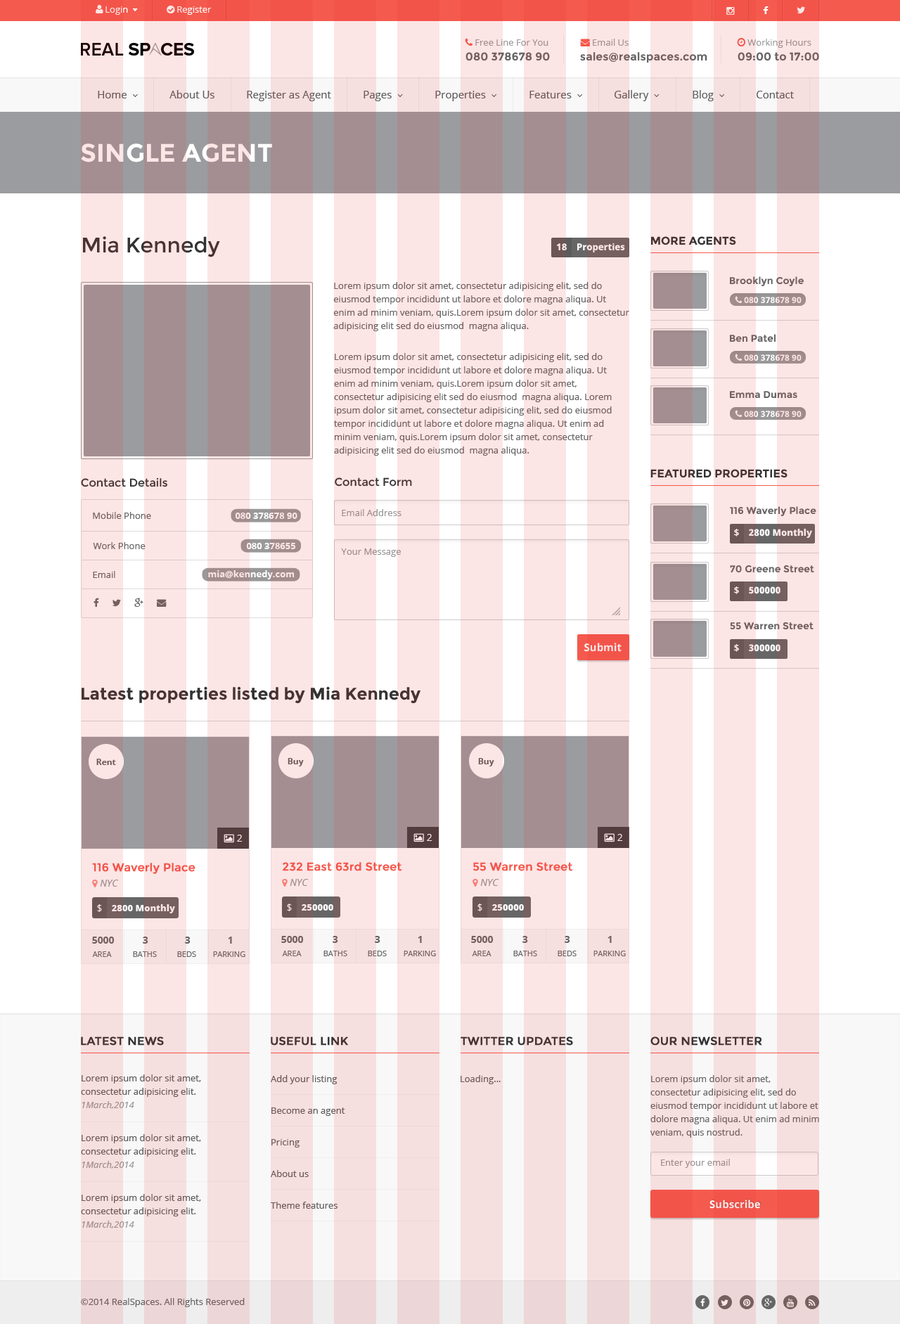
<style>
.page{position:relative;width:900px;height:1324px;background:#ffffff}
.page>*{position:absolute;margin:0}
.t1{font:11.3px "Montserrat-Bold";color:#666666}
.t2{font:10.6px "OpenSans";color:#5e5e5e}
.t3{font:25.3px "Montserrat-Bold";text-transform:uppercase}
.t4{font:21.1px "Montserrat-Regular";color:#333333}
.t5{font:9.1px "OpenSans-Bold";color:#fce5e5}
.t6{font:11.3px "Montserrat-Bold";color:#333333;text-transform:uppercase}
.t7{font:9.8px "Montserrat-Bold";color:#666666}
.t8{font:9.1px/13.4px "OpenSans";color:#666666}
.t9{font:11.3px "Montserrat-Regular";color:#333333}
.t10{font:9.1px "OpenSans";color:#999999}
.t11{font:9.1px "OpenSans";color:#666666}
.t12{font:9.1px "OpenSans-Bold"}
.t13{font:9.1px "OpenSans-Extrabold"}
.t14{font:9.1px "OpenSans-Extrabold";color:#ffffff}
.t15{font:9.1px "OpenSans-Bold";color:#ffffff}
.t16{font:10.6px "OpenSans-Bold";color:#fce5e5}
.t17{font:16.9px "Montserrat-Bold";color:#333333}
.t18{font:8.4px "OpenSans-Bold";color:#5e5e5e}
.t19{font:9.8px "OpenSans";color:#fce5e5}
.t20{font:11.3px "Montserrat-Regular";color:#f55a4e;font-weight:bold}
.t21{font:9.1px "OpenSans";color:#fce5e5}
.t22{font:9.8px "OpenSans-Bold";color:#666666}
.t23{font:7.7px "OpenSans";color:#666666}
.t24{font:11.3px "Montserrat-Regular";color:#333333;font-weight:bold}
.t25{font:9.1px/13.4px "OpenSans";color:#5e5e5e}
.t26{font:9.1px/13.4px "OpenSans-Italic";color:#999999}
.t27{font:9.1px/31.7px "OpenSans";color:#5e5e5e}
.t28{font:9.1px "OpenSans";color:#5e5e5e}
</style>
<div class="page">
<p class="t1" style="left:466px;top:52px;width:84px;height:9px">080 378678 90</p>
<p class="t1" style="left:580px;top:52px;width:128px;height:11px">sales@realspaces.com</p>
<p class="t1" style="left:738px;top:52px;width:81px;height:9px">09:00 to 17:00</p>
<p class="t2" style="left:170px;top:90px;width:45px;height:8px">About Us</p>
<p class="t2" style="left:247px;top:91px;width:84px;height:10px">Register as Agent</p>
<p class="t2" style="left:757px;top:91px;width:37px;height:7px">Contact</p>
<p class="t3" style="left:81px;top:143px;width:191px;height:19px">Single Agent</p>
<p class="t4" style="left:83px;top:236px;width:137px;height:21px">Mia Kennedy</p>
<p class="t5" style="left:557px;top:243px;width:68px;height:10px">18    Properties</p>
<p class="t6" style="left:651px;top:236px;width:85px;height:9px">MOre agents</p>
<p class="t7" style="left:730px;top:276px;width:74px;height:10px">Brooklyn Coyle</p>
<p class="t8" style="left:333px;top:282px;width:297px;height:49px">Lorem ipsum dolor sit amet, consectetur adipisicing elit, sed do eiusmod tempor incididunt ut labore et dolore magna aliqua. Ut enim ad minim veniam, quis.Lorem ipsum dolor sit amet, consectetur adipisicing elit sed do eiusmod  magna aliqua.</p>
<p class="t7" style="left:730px;top:334px;width:46px;height:8px">Ben Patel</p>
<p class="t8" style="left:334px;top:353px;width:278px;height:103px">Lorem ipsum dolor sit amet, consectetur adipisicing elit, sed do eiusmod tempor incididunt ut labore et dolore magna aliqua. Ut enim ad minim veniam, quis.Lorem ipsum dolor sit amet, consectetur adipisicing elit sed do eiusmod  magna aliqua. Lorem ipsum dolor sit amet, consectetur adipisicing elit, sed do eiusmod tempor incididunt ut labore et dolore magna aliqua. Ut enim ad minim veniam, quis.Lorem ipsum dolor sit amet, consectetur adipisicing elit sed do eiusmod  magna aliqua.</p>
<p class="t7" style="left:730px;top:391px;width:68px;height:7px">Emma Dumas</p>
<p class="t6" style="left:651px;top:469px;width:137px;height:9px">Featured properties</p>
<p class="t9" style="left:81px;top:478px;width:86px;height:9px">Contact Details</p>
<p class="t9" style="left:335px;top:478px;width:77px;height:9px">Contact Form</p>
<p class="t10" style="left:342px;top:509px;width:60px;height:7px">Email Address</p>
<p class="t7" style="left:730px;top:506px;width:87px;height:10px">116 Waverly Place</p>
<p class="t11" style="left:93px;top:512px;width:58px;height:7px">Mobile Phone</p>
<p class="t12" style="left:235px;top:513px;width:63px;height:6px">080 378678 90</p>
<p class="t13" style="left:734px;top:529px;width:78px;height:9px"><span class="t12">$    </span>2800 Monthly</p>
<p class="t11" style="left:93px;top:542px;width:53px;height:7px">Work Phone</p>
<p class="t12" style="left:246px;top:543px;width:50px;height:6px">080 378655</p>
<p class="t10" style="left:341px;top:549px;width:60px;height:8px">Your Message</p>
<p class="t7" style="left:730px;top:566px;width:85px;height:7px">70 Greene Street</p>
<p class="t11" style="left:93px;top:571px;width:22px;height:7px">Email</p>
<p class="t5" style="left:208px;top:570px;width:87px;height:10px">mia@kennedy.com</p>
<p class="t14" style="left:734px;top:587px;width:47px;height:7px"><span class="t15">$    </span>500000</p>
<p class="t7" style="left:730px;top:622px;width:84px;height:8px">55 Warren Street</p>
<p class="t16" style="left:585px;top:643px;width:37px;height:9px">Submit</p>
<p class="t14" style="left:734px;top:644px;width:47px;height:8px"><span class="t15">$    </span>300000</p>
<p class="t17" style="left:82px;top:686px;width:339px;height:17px">Latest properties listed by Mia Kennedy</p>
<p class="t18" style="left:96px;top:759px;width:20px;height:6px">Rent</p>
<p class="t18" style="left:288px;top:758px;width:16px;height:9px">Buy</p>
<p class="t18" style="left:478px;top:758px;width:16px;height:9px">Buy</p>
<p class="t19" style="left:237px;top:835px;width:6px;height:7px">2</p>
<p class="t19" style="left:427px;top:834px;width:6px;height:7px">2</p>
<p class="t19" style="left:618px;top:834px;width:5px;height:7px">2</p>
<p class="t20" style="left:92px;top:863px;width:104px;height:11px">116 Waverly Place</p>
<p class="t20" style="left:283px;top:862px;width:119px;height:9px">232 East 63rd Street</p>
<p class="t20" style="left:473px;top:862px;width:100px;height:9px">55 Warren Street</p>
<p class="t21" style="left:97px;top:905px;width:5px;height:7px">$</p>
<p class="t13" style="left:112px;top:905px;width:63px;height:9px">2800 Monthly</p>
<p class="t21" style="left:287px;top:904px;width:5px;height:8px">$</p>
<p class="t14" style="left:302px;top:905px;width:31px;height:6px">250000</p>
<p class="t21" style="left:478px;top:904px;width:5px;height:8px">$</p>
<p class="t14" style="left:492px;top:905px;width:32px;height:6px">250000</p>
<p class="t22" style="left:92px;top:937px;width:23px;height:7px">5000</p>
<p class="t22" style="left:143px;top:937px;width:5px;height:7px">3</p>
<p class="t22" style="left:185px;top:937px;width:6px;height:7px">3</p>
<p class="t22" style="left:228px;top:937px;width:4px;height:7px">1</p>
<p class="t22" style="left:281px;top:936px;width:23px;height:7px">5000</p>
<p class="t22" style="left:333px;top:936px;width:5px;height:7px">3</p>
<p class="t22" style="left:375px;top:936px;width:6px;height:7px">3</p>
<p class="t22" style="left:418px;top:936px;width:4px;height:7px">1</p>
<p class="t22" style="left:471px;top:936px;width:23px;height:7px">5000</p>
<p class="t22" style="left:523px;top:936px;width:5px;height:7px">3</p>
<p class="t22" style="left:565px;top:936px;width:5px;height:7px">3</p>
<p class="t22" style="left:608px;top:936px;width:4px;height:7px">1</p>
<p class="t23" style="left:92px;top:952px;width:20px;height:5px">AREA</p>
<p class="t23" style="left:133px;top:952px;width:24px;height:5px">BATHS</p>
<p class="t23" style="left:177px;top:952px;width:19px;height:5px">BEDS</p>
<p class="t23" style="left:213px;top:952px;width:32px;height:5px">PARKING</p>
<p class="t23" style="left:282px;top:951px;width:20px;height:6px">AREA</p>
<p class="t23" style="left:324px;top:951px;width:23px;height:6px">BATHS</p>
<p class="t23" style="left:368px;top:951px;width:19px;height:6px">BEDS</p>
<p class="t23" style="left:404px;top:951px;width:32px;height:6px">PARKING</p>
<p class="t23" style="left:472px;top:951px;width:20px;height:6px">AREA</p>
<p class="t23" style="left:513px;top:951px;width:24px;height:6px">BATHS</p>
<p class="t23" style="left:558px;top:951px;width:19px;height:6px">BEDS</p>
<p class="t23" style="left:594px;top:951px;width:32px;height:6px">PARKING</p>
<p class="t24" style="left:81px;top:1037px;width:83px;height:9px">LATEST NEWS</p>
<p class="t24" style="left:271px;top:1037px;width:77px;height:9px">USEFUL LINK</p>
<p class="t24" style="left:461px;top:1037px;width:112px;height:9px">TWITTER UPDATES</p>
<p class="t24" style="left:651px;top:1037px;width:111px;height:9px">OUR NEWSLETTER</p>
<p class="t25" style="left:81px;top:1075px;width:120px;height:34px">Lorem ipsum dolor sit amet, consectetur adipisicing elit.<br><span class="t26">1March,2014</span></p>
<p class="t27" style="left:271px;top:1075px;width:74px;height:134px">Add your listing<br>Become an agent<br>Pricing<br>About us<br>Theme features</p>
<p class="t28" style="left:461px;top:1075px;width:40px;height:10px">Loading...</p>
<p class="t8" style="left:651px;top:1075px;width:168px;height:63px">Lorem ipsum dolor sit amet, consectetur adipisicing elit, sed do eiusmod tempor incididunt ut labore et dolore magna aliqua. Ut enim ad minim veniam, quis nostrud.</p>
<p class="t25" style="left:81px;top:1135px;width:120px;height:34px">Lorem ipsum dolor sit amet, consectetur adipisicing elit.<br><span class="t26">1March,2014</span></p>
<p class="t10" style="left:661px;top:1159px;width:69px;height:9px">Enter your email</p>
<p class="t25" style="left:81px;top:1194px;width:120px;height:35px">Lorem ipsum dolor sit amet, consectetur adipisicing elit.<br><span class="t26">1March,2014</span></p>
<p class="t16" style="left:710px;top:1200px;width:50px;height:9px">Subscribe</p>
<p class="t11" style="left:81px;top:1298px;width:164px;height:10px">©2014 RealSpaces. All Rights Reserved</p>
</div>
